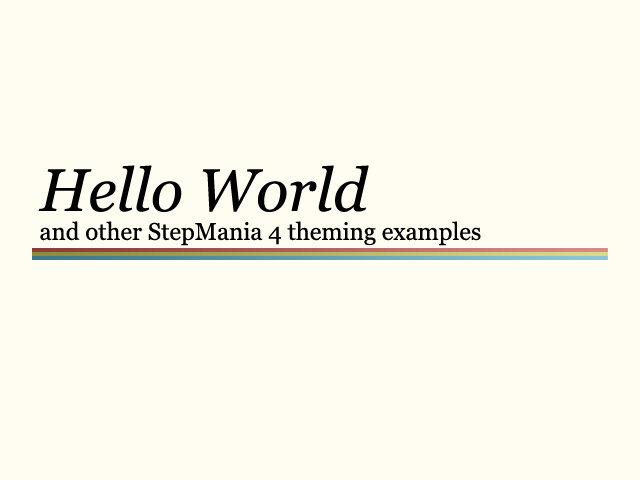
<style>
.page{position:relative;width:640px;height:480px;background:#fffdf2}
.page>*{position:absolute;margin:0}
.t1{font:24px "Georgia";color:#000000}
.t2{font:60px "Georgia-Italic";color:#000000}
</style>
<div class="page">
<p class="t1" style="left:38px;top:165px;width:443px;height:81px"><span class="t2">Hello World<br></span>and other StepMania 4 theming examples</p>
</div>
